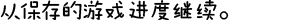
<style>
.page{position:relative;width:287px;height:20px;background:#ffffff}
.page>*{position:absolute;margin:0}
.t1{font:24px "¢è?";color:#000000}
</style>
<div class="page">
<p class="t1" style="left:0px;top:0px;width:229px;height:21px">从保存的游戏进度继续。</p>
</div>
